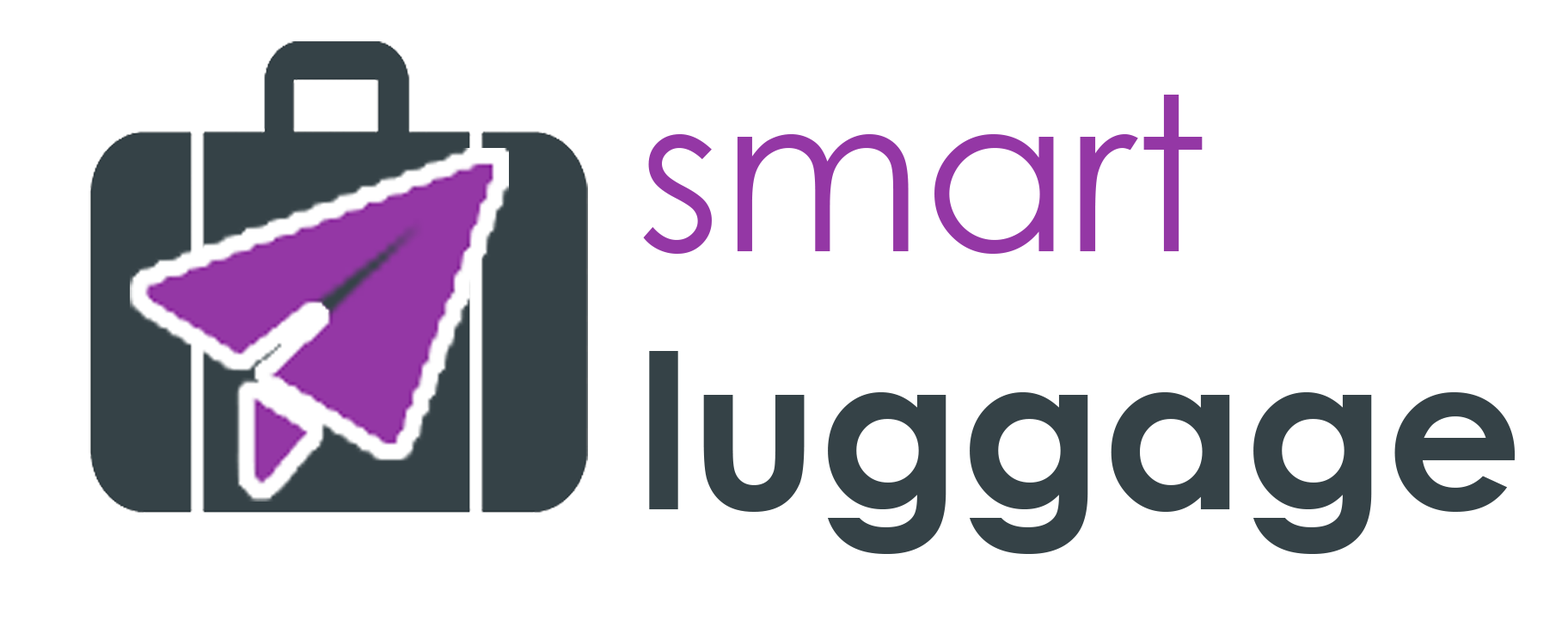
<style>
.page{position:relative;width:1568px;height:640px;background:#ffffff}
.page>*{position:absolute;margin:0}
.t1{font:214.9px "CenturyGothic-Bold";color:#354247}
.t2{font:214.9px "CenturyGothic";color:#9437a5}
</style>
<div class="page">
<p class="t1" style="left:643px;top:95px;width:873px;height:459px"><span class="t2">smart<br></span>luggage</p>
</div>
